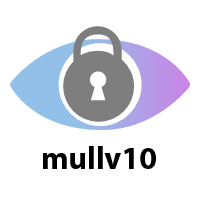
<style>
.page{position:relative;width:200px;height:200px;background:#ffffff}
.page>*{position:absolute;margin:0}
.t1{font:32px "MyriadPro-Bold";color:#000000}
</style>
<div class="page">
<p class="t1" style="left:43px;top:146px;width:113px;height:23px">mullv10</p>
</div>
